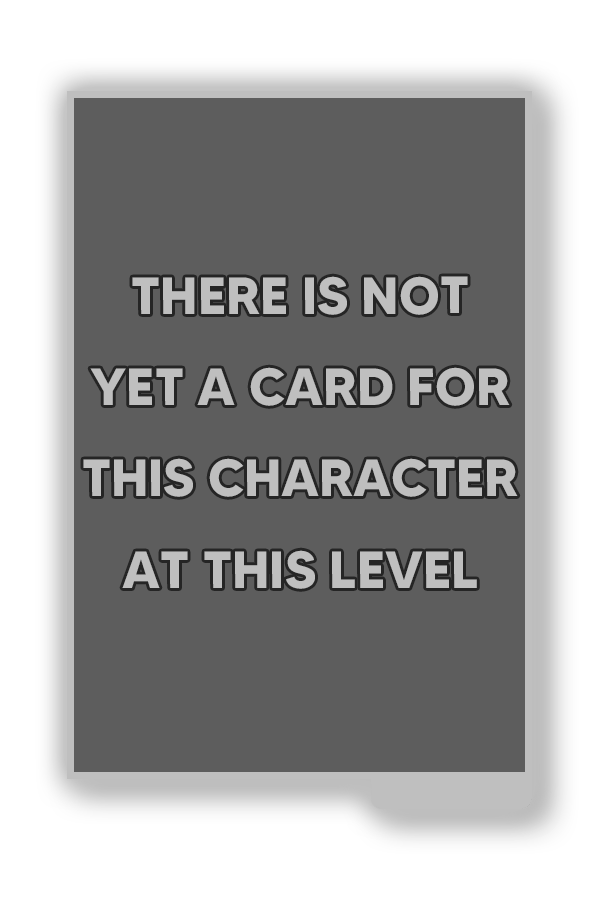
<style>
.page{position:relative;width:600px;height:900px;background:#5d5d5d}
.page>*{position:absolute;margin:0}
.t1{font:52.2px "MADETOMMY-Bold";color:#bfbfbf}
</style>
<div class="page">
<p class="t1" style="left:83px;top:276px;width:435px;height:313px;text-align:center">THERE IS NOT<br>YET A CARD FOR<br>THIS CHARACTER<br>AT THIS LEVEL</p>
</div>
